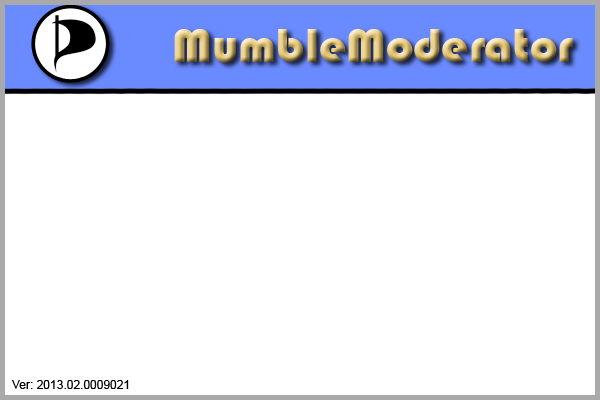
<style>
.page{position:relative;width:600px;height:400px;background:#ffffff}
.page>*{position:absolute;margin:0}
.t1{font:49px "Bauhaus93"}
.t2{font:12px "ArialMT";color:#000000}
</style>
<div class="page">
<p class="t1" style="left:174px;top:29px;width:399px;height:34px">MumbleModerator</p>
<p class="t2" style="left:12px;top:380px;width:117px;height:9px">Ver: 2013.02.0009021</p>
</div>
